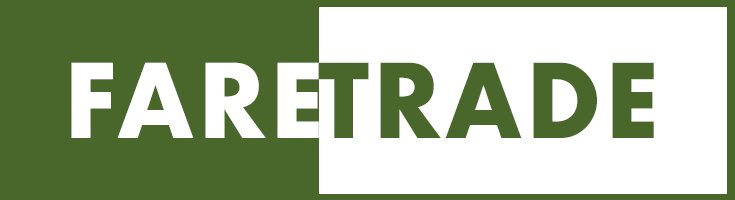
<style>
.page{position:relative;width:735px;height:200px;background:#49672b}
.page>*{position:absolute;margin:0}
.t1{font:99.8px "Futura-Bold";letter-spacing:0.04em;color:#ffffff;scale:0.96 1}
.t2{font:99.8px "Futura-Bold";letter-spacing:0.04em;color:#49672b;scale:0.96 1}
</style>
<div class="page">
<p class="t1" style="left:71px;top:62px;width:248px;height:76px">FARE</p>
<p class="t2" style="left:318px;top:62px;width:336px;height:76px">TRADE</p>
</div>
